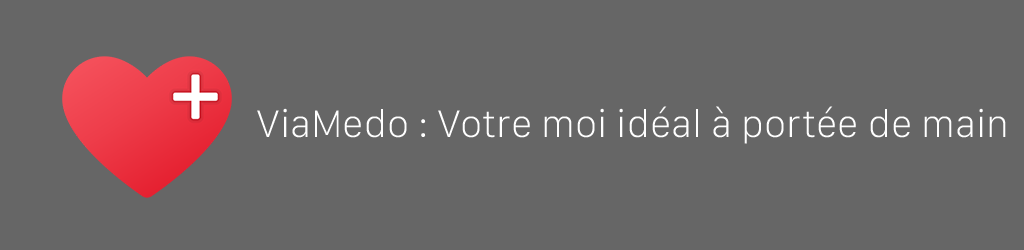
<style>
.page{position:relative;width:1024px;height:250px;background:#666666}
.page>*{position:absolute;margin:0}
.t1{font:40px "SFCompact-Thin";color:#ffffff}
</style>
<div class="page">
<p class="t1" style="left:257px;top:106px;width:749px;height:38px">ViaMedo : Votre moi idéal à portée de main</p>
</div>
